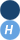
<style>
.page{position:relative;width:20px;height:40px;background:#19446f}
.page>*{position:absolute;margin:0}
.t1{font:12px "MyriadPro-Regular";color:#ffffff;font-weight:bold;font-style:italic}
</style>
<div class="page">
<p class="t1" style="left:4px;top:25px;width:9px;height:10px">H</p>
</div>
